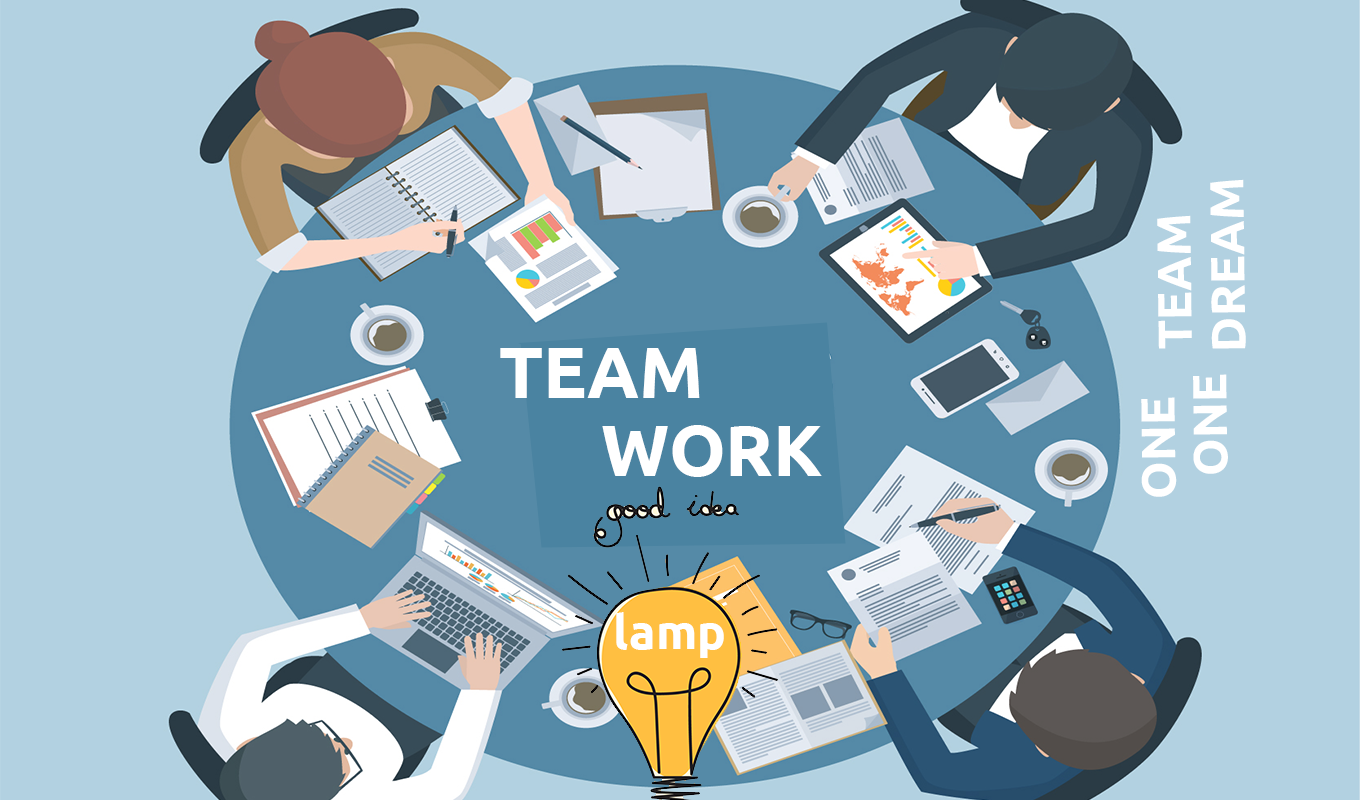
<style>
.page{position:relative;width:1360px;height:800px;background:#b2d1e1}
.page>*{position:absolute;margin:0}
.t1{font:47.9px "Ubuntu-Bold";color:#ffffff}
.t2{font:72px "Ubuntu-Bold";color:#ffffff}
.t3{font:48px "Ubuntu-Bold";color:#ffffff}
</style>
<div class="page">
<p class="t1" style="left:1210px;top:179px;width:36px;height:170px;rotate:-91deg">DREAM</p>
<p class="t1" style="left:1157px;top:215px;width:35px;height:134px;rotate:-91deg">TEAM</p>
<p class="t2" style="left:500px;top:348px;width:200px;height:50px">TEAM</p>
<p class="t1" style="left:1193px;top:374px;width:35px;height:100px;rotate:-91deg">ONE</p>
<p class="t1" style="left:1141px;top:397px;width:36px;height:100px;rotate:-91deg">ONE</p>
<p class="t2" style="left:602px;top:425px;width:220px;height:52px">WORK</p>
<p class="t3" style="left:616px;top:612px;width:108px;height:46px">lamp</p>
</div>
